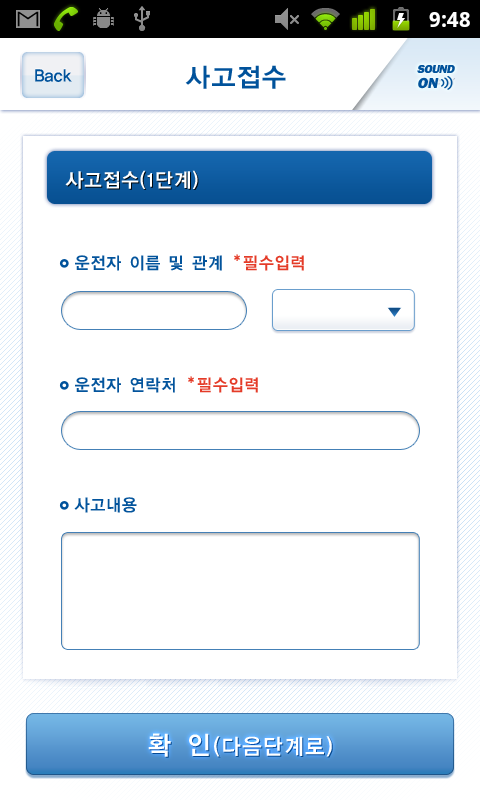
<style>
.page{position:relative;width:480px;height:800px;background:#ffffff}
.page>*{position:absolute;margin:0}
.t1{font:26px "YDIYGO140-KSCpc-EUC-H";letter-spacing:-0.025em;color:#00529b}
.t2{font:12px/15px "FranklinGothic-Heavy";letter-spacing:-0.05em;color:#00529b;text-transform:uppercase;font-style:italic}
.t3{font:13px/15px "FranklinGothic-Heavy";color:#00529b;text-transform:uppercase;font-style:italic}
.t4{font:15px/15px "FranklinGothic-Heavy";color:#00529b;text-transform:uppercase;font-style:italic}
.t5{font:18px "YDIYGO140-KSCpc-EUC-H";letter-spacing:-0.075em;color:#00529b;scale:0.95 1}
.t6{font:20px "YDIYGO140-KSCpc-EUC-H";letter-spacing:-0.025em;color:#ffffff;scale:0.95 1}
.t7{font:17px "YDIYGO140-KSCpc-EUC-H";letter-spacing:-0.025em;color:#00529b;scale:0.95 1}
.t8{font:17px "YDIYGO140-KSCpc-EUC-H";letter-spacing:-0.025em;color:#e43925;scale:0.95 1}
.t9{font:17px "YDIYGO140-KSCpc-EUC-H";letter-spacing:-0.2em;color:#e43925;scale:0.95 1}
.t10{font:22px "YDIYGO140-KSCpc-EUC-H";color:#ffffff;scale:0.95 1}
.t11{font:26px "YDIYGO140-KSCpc-EUC-H";letter-spacing:0.05em;color:#ffffff;scale:0.95 1}
</style>
<div class="page">
<p class="t1" style="left:185px;top:65px;width:101px;height:24px">사고접수</p>
<p class="t2" style="left:417px;top:65px;width:38px;height:24px">sound<br><span class="t3">oFF</span></p>
<p class="t2" style="left:417px;top:65px;width:38px;height:24px">sound<br><span class="t4">on</span></p>
<p class="t5" style="left:35px;top:69px;width:37px;height:13px">Back</p>
<p class="t6" style="left:65px;top:170px;width:133px;height:19px">사고접수(1단계)</p>
<p class="t7" style="left:75px;top:255px;width:147px;height:16px">운전자 이름 및 관계</p>
<p class="t8" style="left:234px;top:254px;width:70px;height:17px"><span class="t9">* </span>필수입력</p>
<p class="t7" style="left:75px;top:377px;width:100px;height:16px">운전자 연락처</p>
<p class="t8" style="left:188px;top:376px;width:70px;height:17px"><span class="t9">* </span>필수입력</p>
<p class="t7" style="left:74px;top:497px;width:63px;height:16px">사고내용</p>
<p class="t10" style="left:148px;top:733px;width:184px;height:24px"><span class="t11">확 인</span>(다음단계로)</p>
<p class="t10" style="left:148px;top:733px;width:184px;height:24px"><span class="t11">확 인</span>(다음단계로)</p>
</div>
